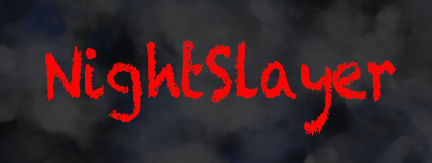
<style>
.page{position:relative;width:432px;height:163px}
.page>*{position:absolute;margin:0}
.t1{font:70.4px "Chalkduster";color:#ff0201;scale:0.81 1}
</style>
<div class="page">
<p class="t1" style="left:45px;top:40px;width:350px;height:96px">NightSlayer</p>
</div>
